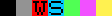
<style>
.page{position:relative;width:112px;height:16px;background:#000000}
.page>*{position:absolute;margin:0}
.t1{font:22.9px "Courier";color:#000000;scale:1.3 1}
</style>
<div class="page">
<p class="t1" style="left:33px;top:1px;width:14px;height:14px">W</p>
</div>
